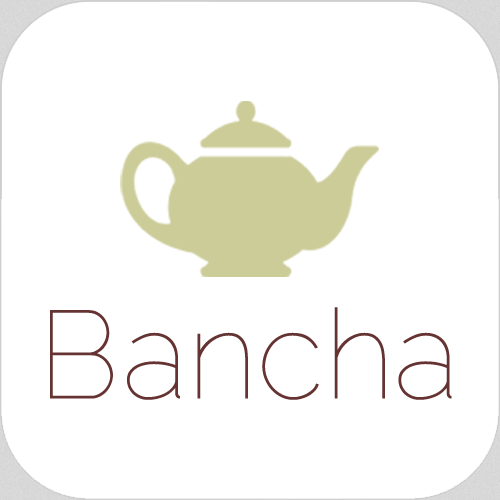
<style>
.page{position:relative;width:500px;height:500px;background:#ffffff}
.page>*{position:absolute;margin:0}
.t1{font:124.2px "Raleway-Thin";color:#663333}
</style>
<div class="page">
<p class="t1" style="left:50px;top:307px;width:402px;height:93px">Bancha</p>
</div>
